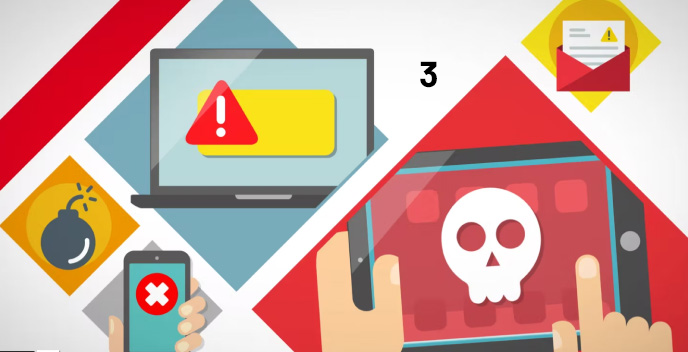
<style>
.page{position:relative;width:688px;height:352px}
.page>*{position:absolute;margin:0}
.t1{font:36px "Barlow-Bold";color:#000000}
</style>
<div class="page">
<p class="t1" style="left:420px;top:61px;width:17px;height:27px">3</p>
</div>
